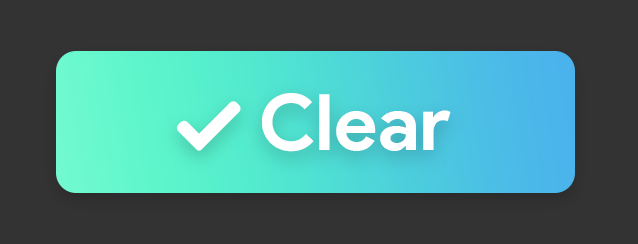
<style>
.page{position:relative;width:638px;height:244px;background:#333333}
.page>*{position:absolute;margin:0}
.t1{font:78px "ProductSans-Bold";color:#ffffff}
</style>
<div class="page">
<p class="t1" style="left:262px;top:93px;width:189px;height:59px">Clear</p>
</div>
